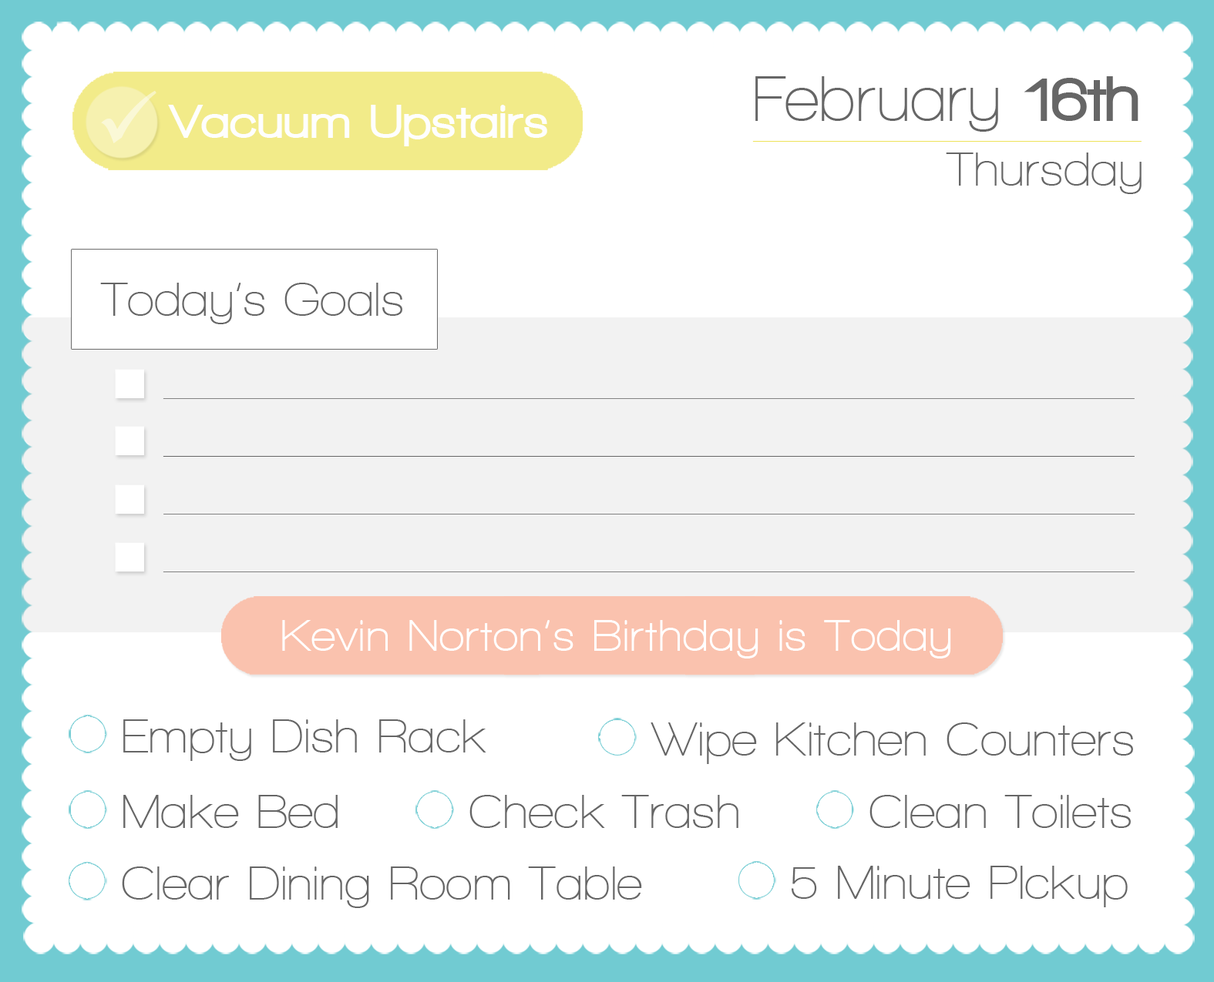
<style>
.page{position:relative;width:1214px;height:982px;background:#ffffff}
.page>*{position:absolute;margin:0}
.t1{font:64.7px "WalkwaySemiBold";color:#666666}
.t2{font:64.7px "WalkwayBlack";color:#666666}
.t3{font:48.5px "WalkwayBlack";letter-spacing:0.025em;color:#fefefe}
.t4{font:48.5px "WalkwaySemiBold";color:#666666}
.t5{font:45px "WalkwayBold";letter-spacing:0.025em;color:#ffffff}
</style>
<div class="page">
<p class="t1" style="left:755px;top:76px;width:383px;height:56px">February <span class="t2">16th</span></p>
<p class="t3" style="left:168px;top:105px;width:379px;height:41px">Vacuum Upstairs</p>
<p class="t4" style="left:946px;top:153px;width:195px;height:41px">Thursday</p>
<p class="t4" style="left:100px;top:283px;width:302px;height:41px">Today’s Goals</p>
<p class="t5" style="left:282px;top:620px;width:669px;height:39px">Kevin Norton’s Birthday is Today</p>
<p class="t4" style="left:123px;top:720px;width:363px;height:41px">Empty Dish Rack</p>
<p class="t4" style="left:650px;top:723px;width:483px;height:41px">Wipe Kitchen Counters</p>
<p class="t4" style="left:123px;top:795px;width:215px;height:33px">Make Bed</p>
<p class="t4" style="left:469px;top:795px;width:269px;height:33px">Check Trash</p>
<p class="t4" style="left:869px;top:795px;width:261px;height:33px">Clean Toilets</p>
<p class="t4" style="left:122px;top:867px;width:520px;height:42px">Clear Dining Room Table</p>
<p class="t4" style="left:791px;top:866px;width:336px;height:42px">5 Minute PIckup</p>
</div>
